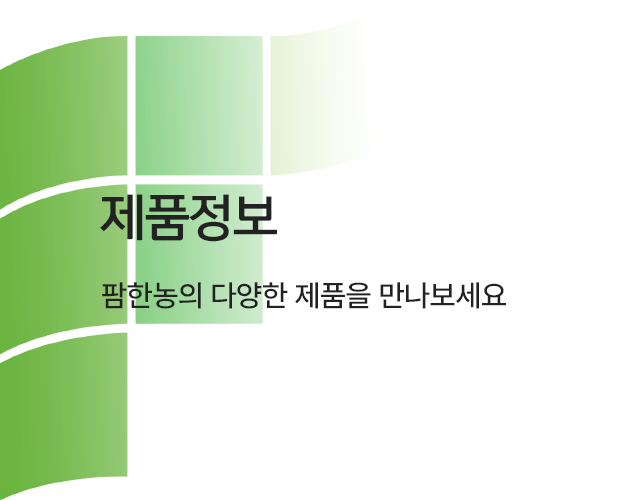
<style>
.page{position:relative;width:640px;height:500px;background:#ffffff}
.page>*{position:absolute;margin:0}
.t1{font:48px "payboocOTFBold";letter-spacing:-0.01em;color:#222222}
.t2{font:30px "PretendardVariable-Medium";letter-spacing:-0.01em;color:#222222}
</style>
<div class="page">
<p class="t1" style="left:100px;top:194px;width:177px;height:48px">제품정보</p>
<p class="t2" style="left:102px;top:282px;width:404px;height:27px">팜한농의 다양한 제품을 만나보세요</p>
</div>
